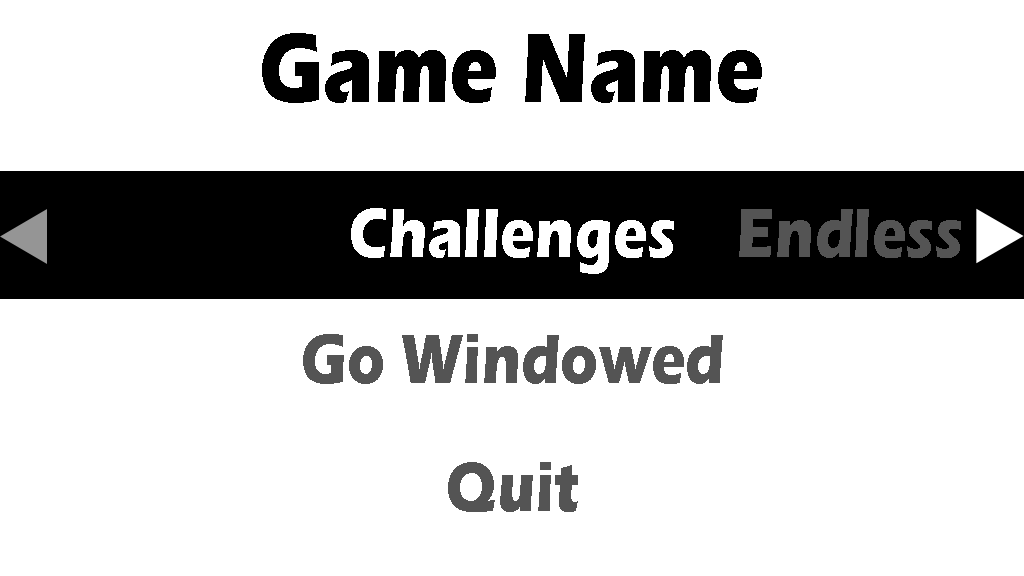
<style>
.page{position:relative;width:1024px;height:576px;background:#ffffff}
.page>*{position:absolute;margin:0}
.t1{font:102px "ErasITC-Bold";letter-spacing:0.01em;color:#000000;scale:0.8 1}
.t2{font:72px "ErasITC-Bold";letter-spacing:0.01em;color:#ffffff;scale:0.8 1}
.t3{font:72px "ErasITC-Bold";letter-spacing:0.01em;color:#545454;scale:0.8 1}
</style>
<div class="page">
<p class="t1" style="left:262px;top:33px;width:500px;height:70px">Game Name</p>
<p class="t2" style="left:351px;top:208px;width:323px;height:66px">Challenges</p>
<p class="t3" style="left:739px;top:209px;width:222px;height:49px">Endless</p>
<p class="t3" style="left:303px;top:334px;width:420px;height:50px">Go Windowed</p>
<p class="t3" style="left:448px;top:462px;width:130px;height:50px">Quit</p>
</div>
